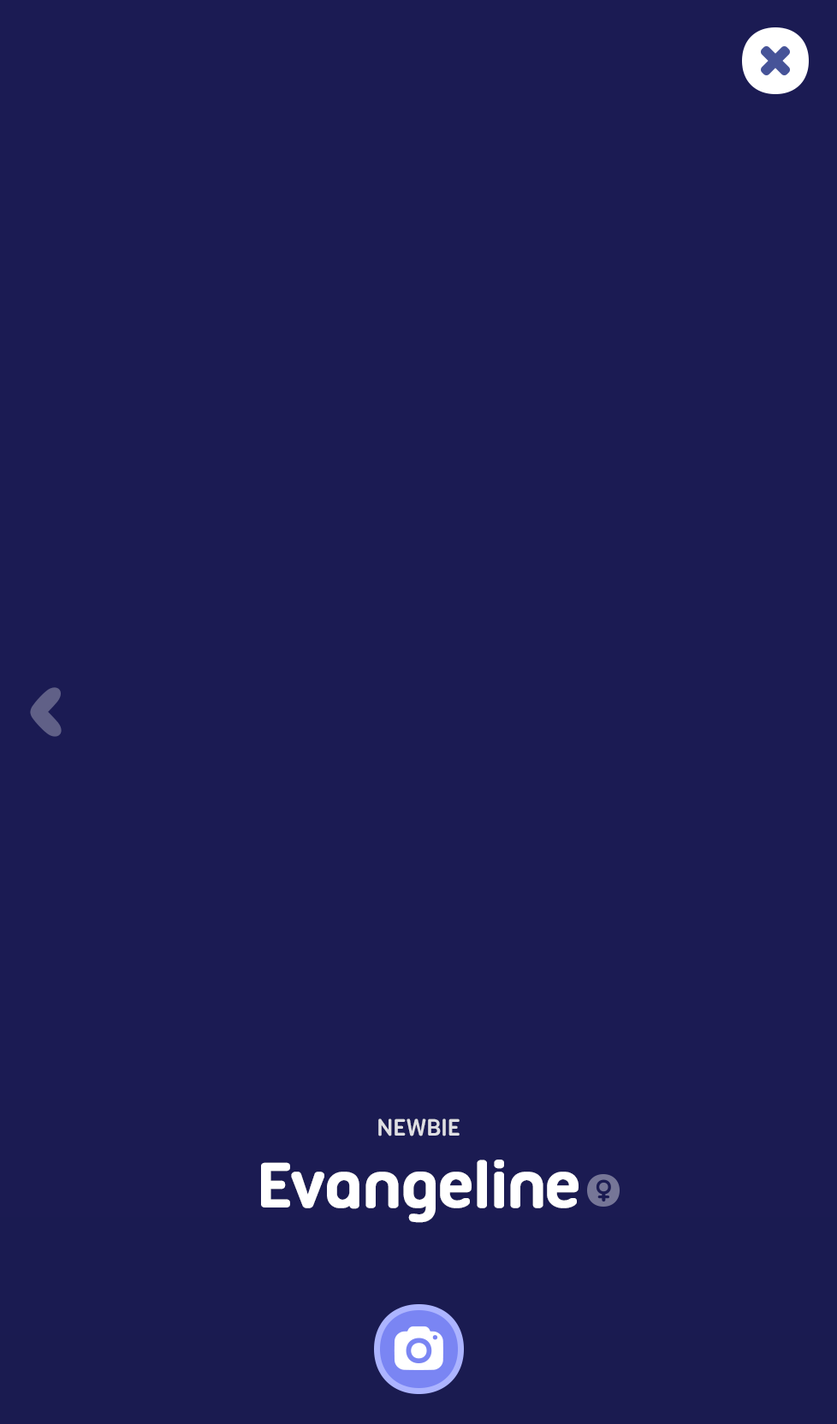
<style>
.page{position:relative;width:837px;height:1424px;background:#1b1b53}
.page>*{position:absolute;margin:0}
.t1{font:25.7px "UbuntuTitling-Bold";letter-spacing:-0.025em;color:#dfdfe3;text-transform:uppercase}
.t2{font:68.5px "UbuntuTitling-Bold";letter-spacing:-0.025em;color:#ffffff;font-weight:bold}
</style>
<div class="page">
<p class="t1" style="left:378px;top:1119px;width:82px;height:18px">Newbie</p>
<p class="t2" style="left:261px;top:1160px;width:318px;height:63px">Evangeline</p>
</div>
